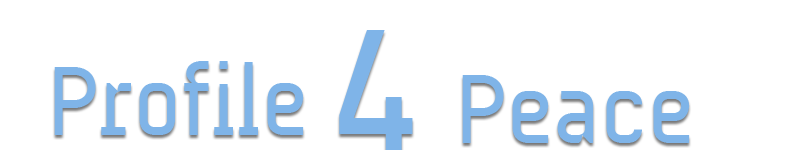
<style>
.page{position:relative;width:800px;height:150px;background:#ffffff}
.page>*{position:absolute;margin:0}
.t1{font:100px "AUdimat-Regular";color:#7fb4e8}
</style>
<div class="page">
<p class="t1" style="left:54px;top:61px;width:250px;height:74px">Profile</p>
<p class="t1" style="left:462px;top:75px;width:228px;height:68px">Peace</p>
</div>
